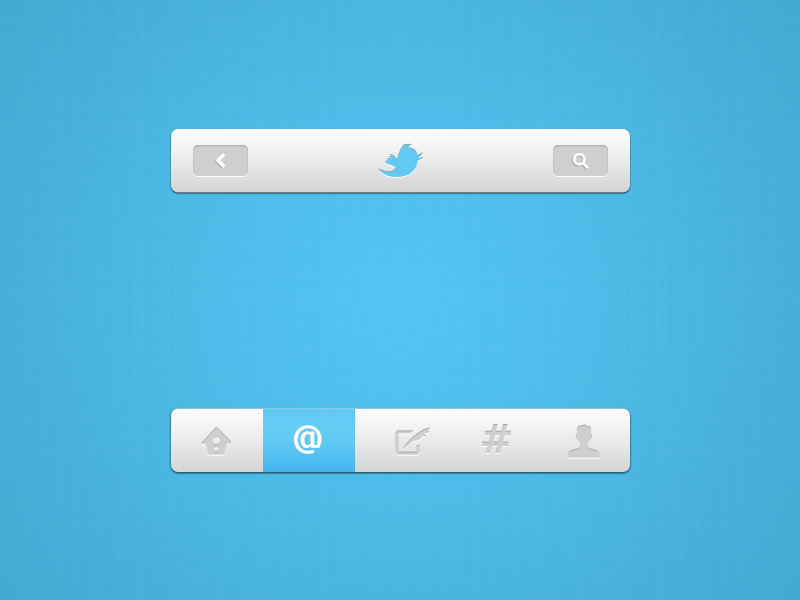
<style>
.page{position:relative;width:800px;height:600px}
.page>*{position:absolute;margin:0}
.t1{font:34.6px "Carousel";color:#ffffff;text-transform:uppercase}
.t2{font:33.4px "Tahoma-Bold";color:#ffffff;text-transform:uppercase;scale:1.03 1}
</style>
<div class="page">
<p class="t1" style="left:215px;top:153px;width:11px;height:15px">&lt;</p>
<p class="t2" style="left:294px;top:425px;width:28px;height:29px">@</p>
</div>
